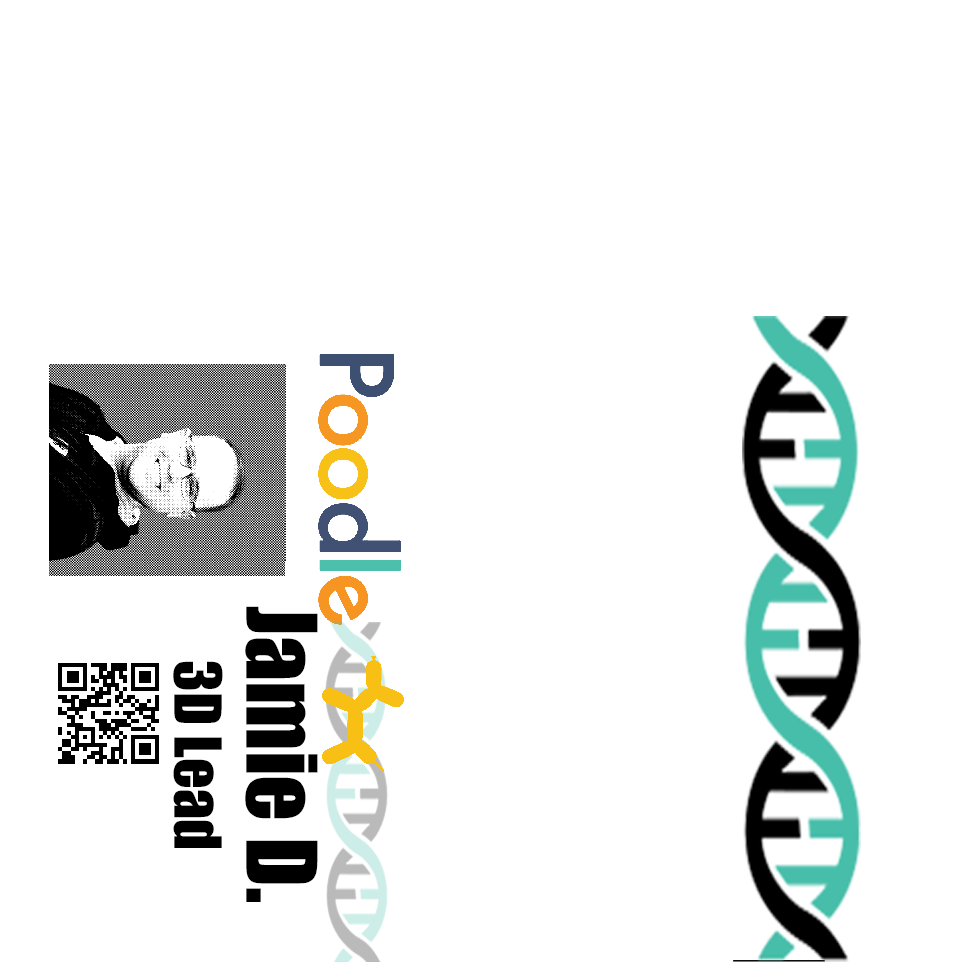
<style>
.page{position:relative;width:960px;height:962px;background:#ffffff}
.page>*{position:absolute;margin:0}
.t1{font:90px "Impact";color:#000000}
.t2{font:60px "Impact";color:#000000}
</style>
<div class="page">
<p class="t1" style="left:173px;top:606px;width:145px;height:296px;text-align:center;rotate:90deg">Jamie D.<br><span class="t2">3D Lead</span></p>
</div>
